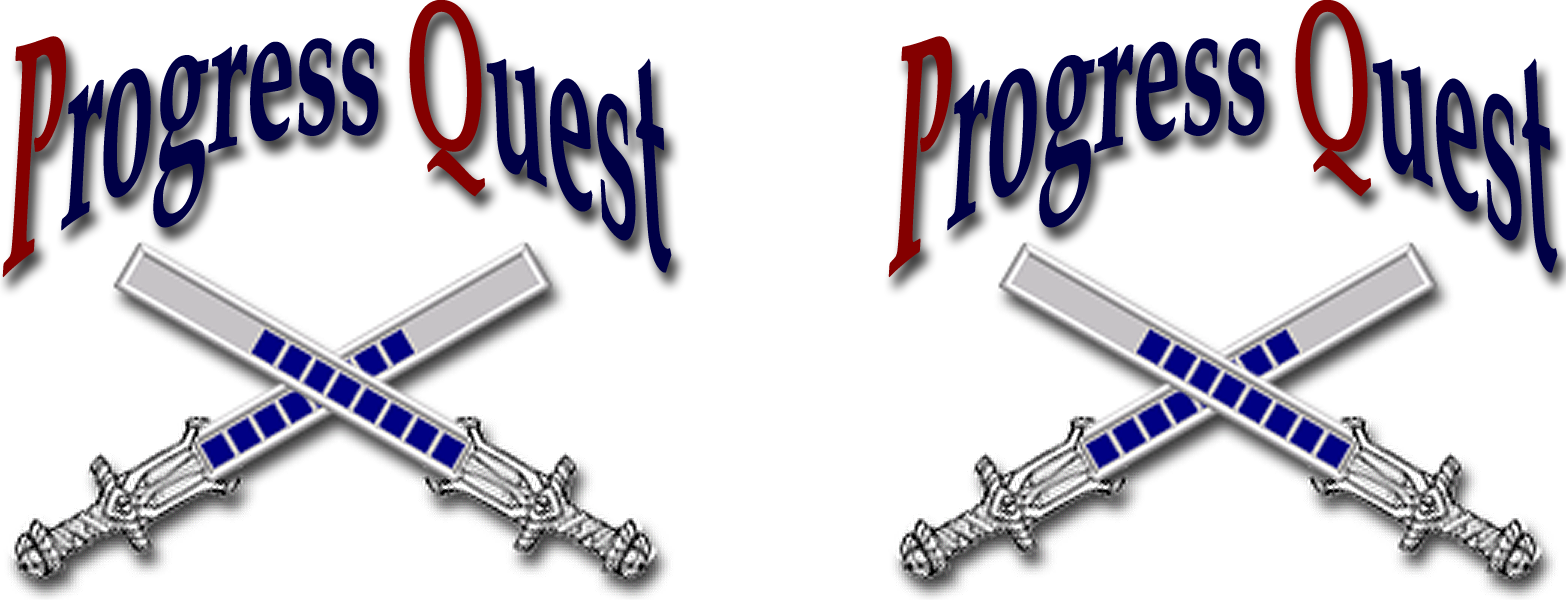
<style>
.page{position:relative;width:1566px;height:600px;background:#ffffff}
.page>*{position:absolute;margin:0}
.t1{font:333.3px "PalatinoLinotype-Bold";color:#000046;scale:0.29 1}
.t2{font:333.3px "PalatinoLinotype-Bold";color:#840000;scale:0.29 1}
</style>
<div class="page">
<p class="t1" style="left:2px;top:0px;width:670px;height:278px"><span class="t2">P</span>rogress <span class="t2">Q</span>uest</p>
<p class="t1" style="left:888px;top:0px;width:670px;height:278px"><span class="t2">P</span>rogress <span class="t2">Q</span>uest</p>
</div>
